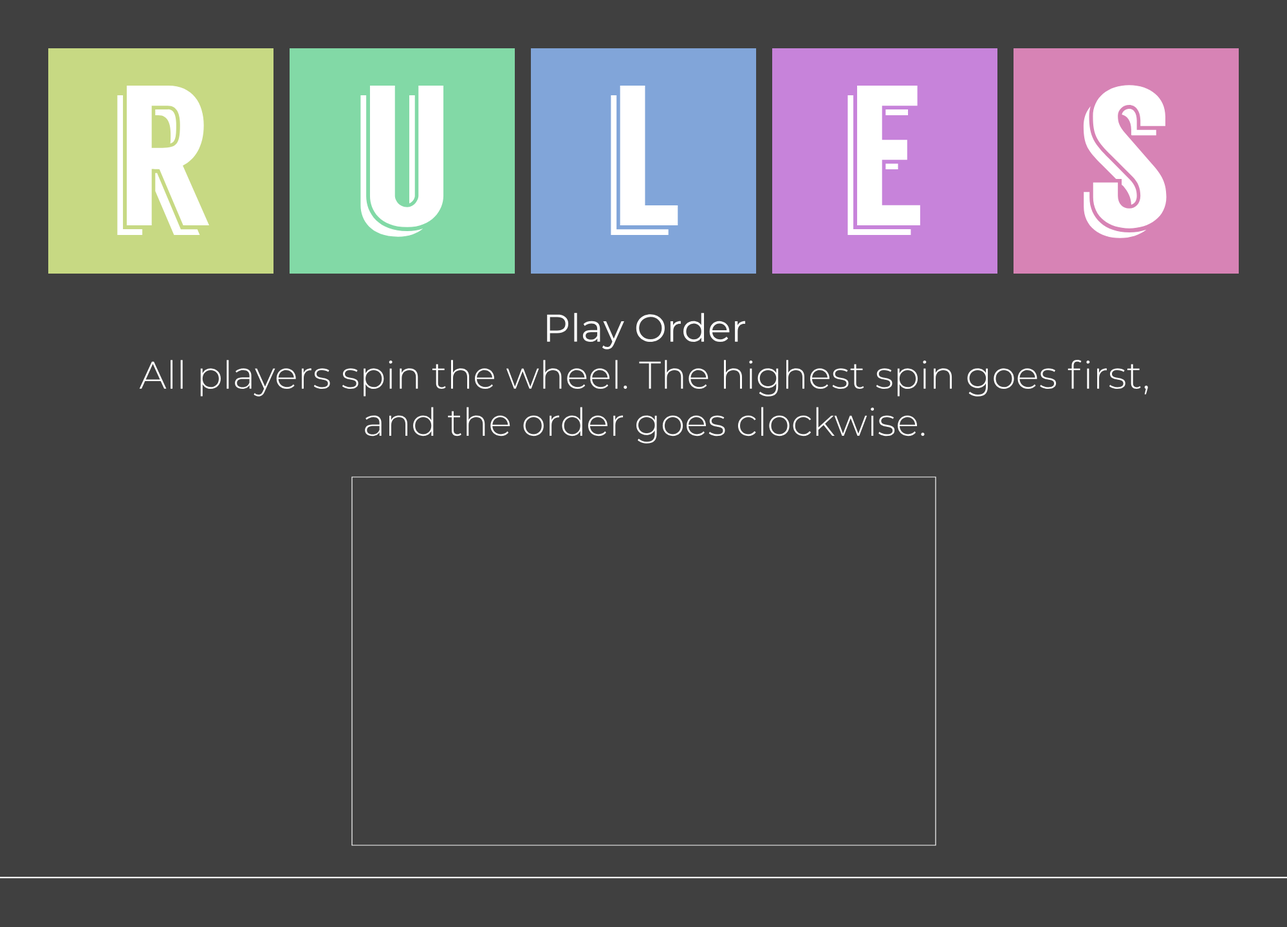
<style>
.page{position:relative;width:1287px;height:927px;background:#404040}
.page>*{position:absolute;margin:0}
.t1{font:199.5px "Langdon";color:#ffffff}
.t2{font:38.6px "Montserrat-Light";color:#ffffff}
.t3{font:38.6px "Montserrat-Regular";color:#ffffff}
</style>
<div class="page">
<p class="t1" style="left:117px;top:86px;width:92px;height:149px">r</p>
<p class="t1" style="left:360px;top:86px;width:84px;height:151px">u</p>
<p class="t1" style="left:611px;top:86px;width:67px;height:149px">l</p>
<p class="t1" style="left:847px;top:86px;width:73px;height:149px">e</p>
<p class="t1" style="left:1083px;top:85px;width:84px;height:153px">s</p>
<p class="t2" style="left:139px;top:313px;width:1009px;height:130px;text-align:center"><span class="t3">Play Order</span><br>All players spin the wheel. The highest spin goes first, and the order goes clockwise.</p>
</div>
